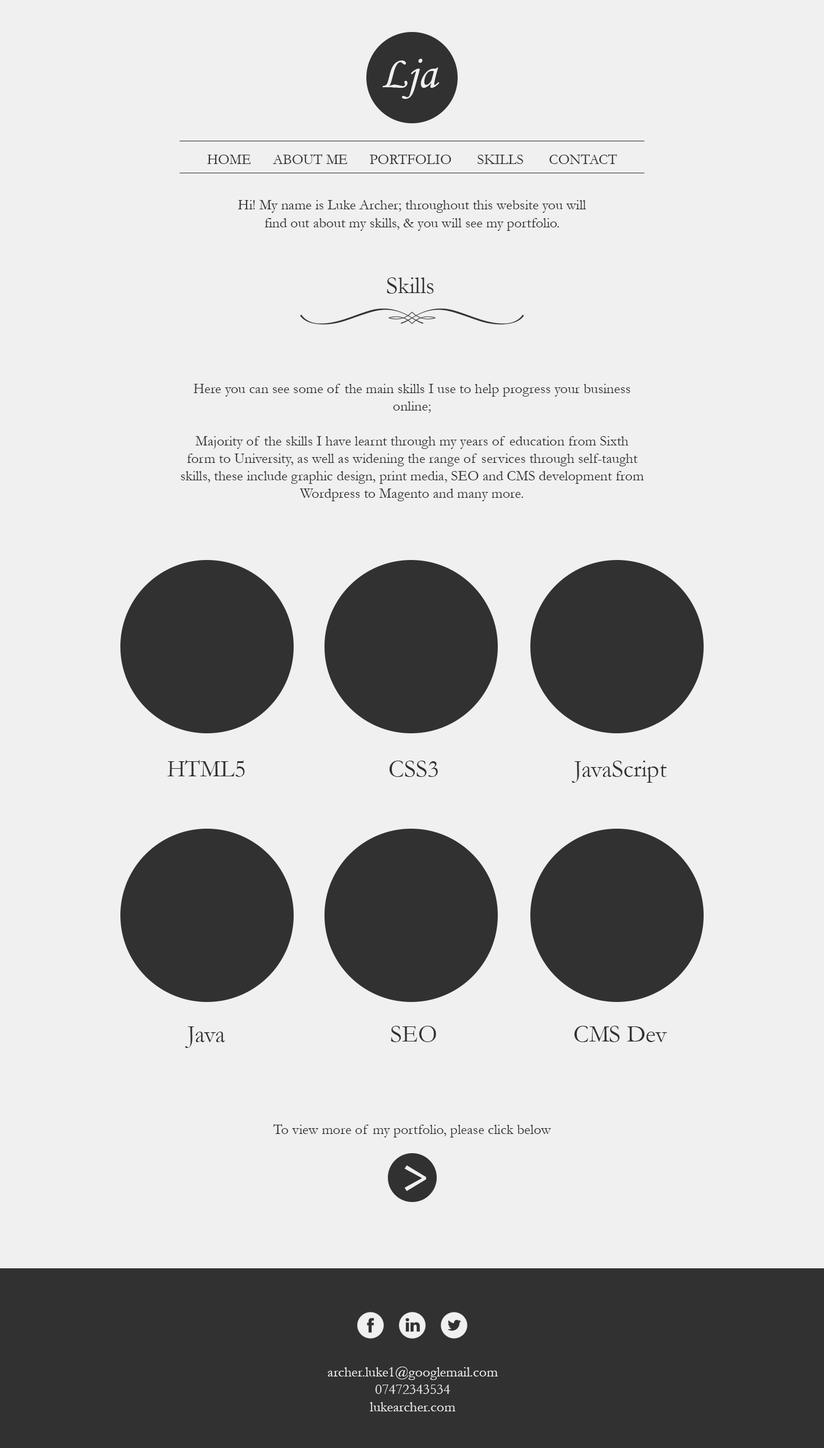
<style>
.page{position:relative;width:824px;height:1448px;background:#f0f0f0}
.page>*{position:absolute;margin:0}
.t1{font:46px "MonotypeCorsiva";color:#f0f0f0}
.t2{font:14.6px "Garamond";color:#2f2f2f}
.t3{font:24.2px "Garamond";color:#313131}
.t4{font:14.6px "Garamond";color:#313131}
.t5{font:53.3px "Candara";color:#f0f0f0}
.t6{font:14.6px "Garamond";color:#f0f0f0}
</style>
<div class="page">
<p class="t1" style="left:382px;top:59px;width:57px;height:40px">Lja</p>
<p class="t2" style="left:207px;top:154px;width:410px;height:10px">HOME      ABOUT ME      PORTFOLIO       SKILLS       CONTACT</p>
<p class="t2" style="left:238px;top:200px;width:348px;height:31px;text-align:center">Hi! My name is Luke Archer; throughout this website you will find out about my skills, &amp; you will see my portfolio.</p>
<p class="t3" style="left:387px;top:277px;width:47px;height:17px">Skills</p>
<p class="t4" style="left:181px;top:384px;width:463px;height:117px;text-align:center">Here you can see some of the main skills I use to help progress your business online; <br><br>Majority of the skills I have learnt through my years of education from Sixth form to University, as well as widening the range of services through self-taught skills, these include graphic design, print media, SEO and CMS development from Wordpress to Magento and many more.</p>
<p class="t3" style="left:167px;top:760px;width:78px;height:17px">HTML5</p>
<p class="t3" style="left:389px;top:760px;width:49px;height:17px">CSS3</p>
<p class="t3" style="left:571px;top:760px;width:96px;height:22px">JavaScript</p>
<p class="t3" style="left:391px;top:1025px;width:45px;height:17px">SEO</p>
<p class="t3" style="left:574px;top:1025px;width:93px;height:17px">CMS Dev</p>
<p class="t3" style="left:185px;top:1026px;width:40px;height:22px">Java</p>
<p class="t4" style="left:273px;top:1124px;width:278px;height:13px">To view more of my portfolio, please click below</p>
<p class="t5" style="left:405px;top:1165px;width:21px;height:26px">&gt;</p>
<p class="t6" style="left:327px;top:1366px;width:171px;height:45px;text-align:center">archer.luke1@googlemail.com<br>07472343534<br>lukearcher.com</p>
</div>
